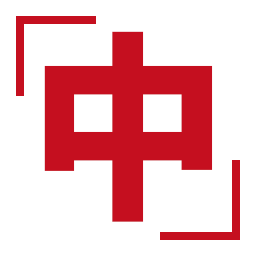
<style>
.page{position:relative;width:256px;height:256px;background:#ffffff}
.page>*{position:absolute;margin:0}
.t1{font:200px "SourceHanSansSC-Heavy";color:#c50f1f}
</style>
<div class="page">
<p class="t1" style="left:44px;top:31px;width:169px;height:191px">中</p>
</div>
